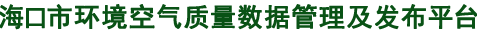
<style>
.page{position:relative;width:477px;height:34px;background:#ffffff}
.page>*{position:absolute;margin:0}
.t1{font:26px "SimHei";letter-spacing:0.1em;color:#095215;font-weight:bold}
</style>
<div class="page">
<p class="t1" style="left:0px;top:4px;width:478px;height:26px">海口市环境空气质量数据管理及发布平台</p>
</div>
